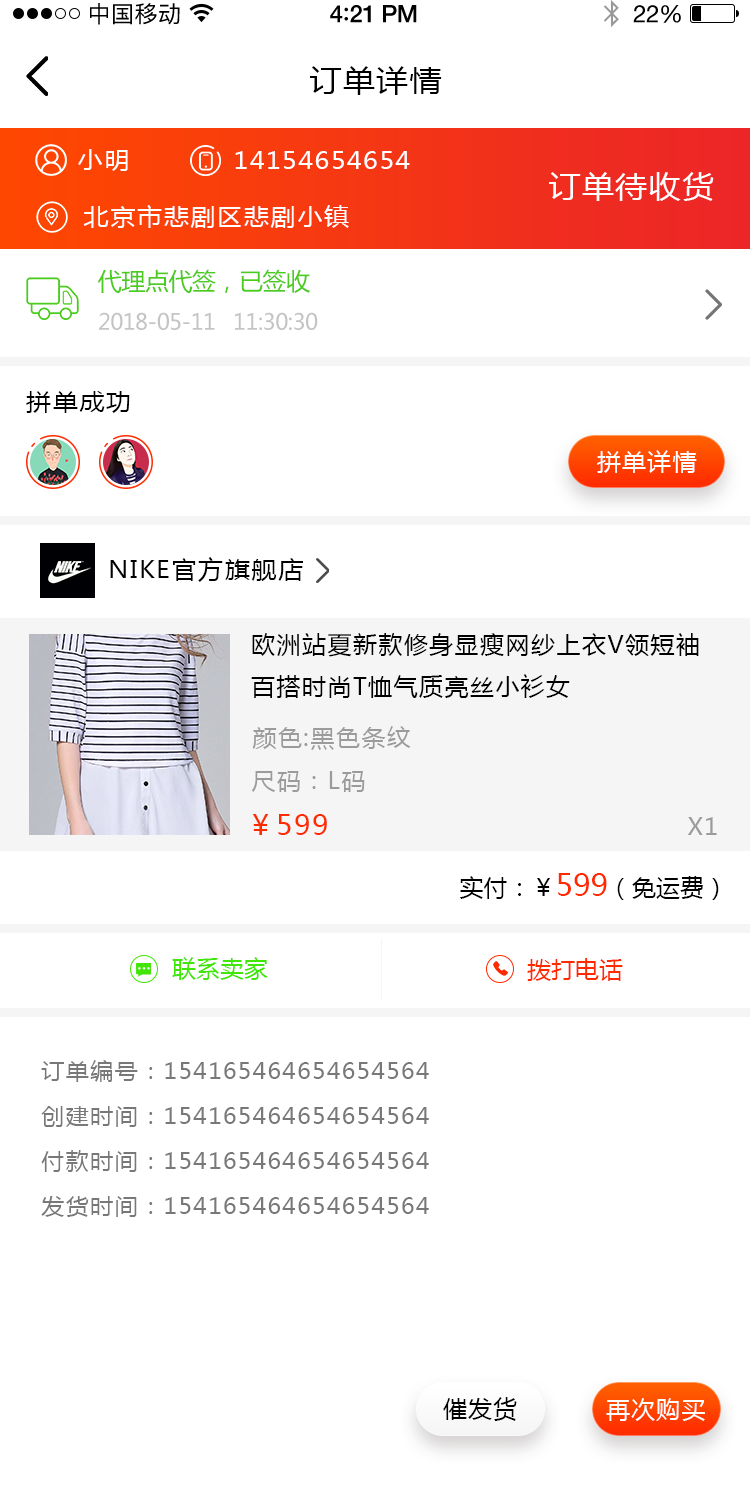
<style>
.page{position:relative;width:750px;height:1498px;background:#ffffff}
.page>*{position:absolute;margin:0}
.t1{font:23px "PingFangSC-Regular";letter-spacing:0.02em;color:#000000}
.t2{font:24px "HelveticaNeue-Medium";letter-spacing:-0.02em;color:#000000}
.t3{font:26px "Avenir-Medium";letter-spacing:-0.02em;color:#000000}
.t4{font:24px "HelveticaNeue";letter-spacing:-0.02em;color:#000000}
.t5{font:30px "MicrosoftYaHei";letter-spacing:0.05em;color:#000000;scale:1.06 1}
.t6{font:24px "MicrosoftYaHei";letter-spacing:0.05em;color:#ffffff;scale:1.06 1}
.t7{font:30px "MicrosoftYaHei";letter-spacing:0.05em;color:#ffffff;scale:1.06 1}
.t8{font:24px "MicrosoftYaHei";letter-spacing:-0.02em;color:#4acb1d}
.t9{font:22px "MicrosoftYaHei";letter-spacing:-0.02em;color:#c4c4c4}
.t10{font:24px "MicrosoftYaHei";letter-spacing:0.05em;color:#000000;scale:1.06 1}
.t11{font:24px "MicrosoftYaHei";letter-spacing:0.05em;color:#ffffff;text-transform:uppercase}
.t12{font:24px "MicrosoftYaHei";letter-spacing:0.06em;color:#000000;text-transform:uppercase}
.t13{font:24px "MicrosoftYaHei";letter-spacing:0.06em;color:#9b9b9b;text-transform:uppercase}
.t14{font:28px "MicrosoftYaHei";letter-spacing:0.06em;color:#ff2a00;text-transform:uppercase}
.t15{font:24px "MicrosoftYaHei";color:#000000;text-transform:uppercase}
.t16{font:30px "MicrosoftYaHei";color:#ff2a00;text-transform:uppercase}
.t17{font:24px "MicrosoftYaHei";color:#41e507;text-transform:uppercase}
.t18{font:24px "MicrosoftYaHei";color:#ff2a00;text-transform:uppercase}
.t19{font:22px "MicrosoftYaHei";letter-spacing:0.05em;color:#787878;scale:1.06 1}
.t20{font:24px "MicrosoftYaHei";letter-spacing:0.05em;color:#000000;text-transform:uppercase}
</style>
<div class="page">
<p class="t1" style="left:90px;top:3px;width:90px;height:22px">中国移动</p>
<p class="t2" style="left:330px;top:5px;width:87px;height:18px">4<span class="t3">:</span>21 PM</p>
<p class="t4" style="left:633px;top:5px;width:48px;height:18px">22%</p>
<p class="t5" style="left:310px;top:66px;width:132px;height:29px">订单详情</p>
<p class="t6" style="left:78px;top:149px;width:50px;height:22px">小明</p>
<p class="t6" style="left:235px;top:151px;width:175px;height:18px">14154654654</p>
<p class="t7" style="left:549px;top:172px;width:165px;height:29px">订单待收货</p>
<p class="t6" style="left:83px;top:205px;width:266px;height:23px">北京市悲剧区悲剧小镇</p>
<p class="t8" style="left:98px;top:269px;width:212px;height:24px">代理点代签，已签收</p>
<p class="t9" style="left:99px;top:312px;width:116px;height:18px">2018-05-11</p>
<p class="t9" style="left:235px;top:312px;width:83px;height:18px">11:30:30</p>
<p class="t10" style="left:26px;top:391px;width:104px;height:22px">拼单成功</p>
<p class="t11" style="left:597px;top:450px;width:100px;height:23px">拼单详情</p>
<p class="t10" style="left:110px;top:557px;width:193px;height:25px">NIKE官方旗舰店</p>
<p class="t12" style="left:251px;top:633px;width:448px;height:65px">欧洲站夏新款修身显瘦网纱上衣v领短袖百搭时尚t恤气质亮丝小衫女</p>
<p class="t13" style="left:252px;top:726px;width:159px;height:24px">颜色:黑色条纹</p>
<p class="t13" style="left:251px;top:771px;width:114px;height:21px">尺码：L码</p>
<p class="t14" style="left:252px;top:814px;width:75px;height:21px">￥599</p>
<p class="t13" style="left:687px;top:817px;width:30px;height:18px">x1</p>
<p class="t15" style="left:460px;top:873px;width:259px;height:27px">实付：￥<span class="t16">599</span>（免运费）</p>
<p class="t17" style="left:172px;top:957px;width:96px;height:23px">联系卖家</p>
<p class="t18" style="left:527px;top:958px;width:96px;height:23px">拨打电话</p>
<p class="t19" style="left:41px;top:1060px;width:388px;height:22px">订单编号：154165464654654564</p>
<p class="t19" style="left:41px;top:1106px;width:388px;height:21px">创建时间：154165464654654564</p>
<p class="t19" style="left:41px;top:1150px;width:388px;height:22px">付款时间：154165464654654564</p>
<p class="t19" style="left:41px;top:1196px;width:388px;height:21px">发货时间：154165464654654564</p>
<p class="t20" style="left:443px;top:1397px;width:74px;height:24px">催发货</p>
<p class="t11" style="left:606px;top:1398px;width:99px;height:23px">再次购买</p>
</div>
